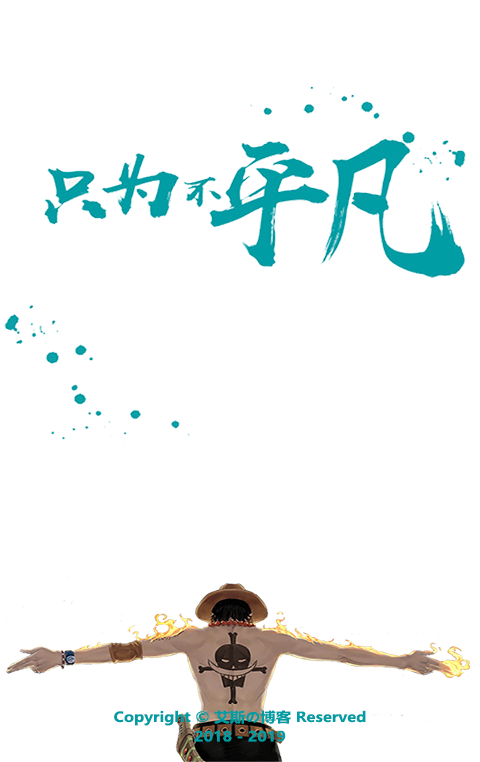
<style>
.page{position:relative;width:480px;height:762px;background:#ffffff}
.page>*{position:absolute;margin:0}
.t1{font:13.7px/19.4px "MicrosoftYaHei-Bold";color:#009da4;scale:1.12 1}
</style>
<div class="page">
<p class="t1" style="left:114px;top:710px;width:252px;height:32px;text-align:center">Copyright © 艾斯の博客 Reserved<br>2018 - 2019</p>
</div>
